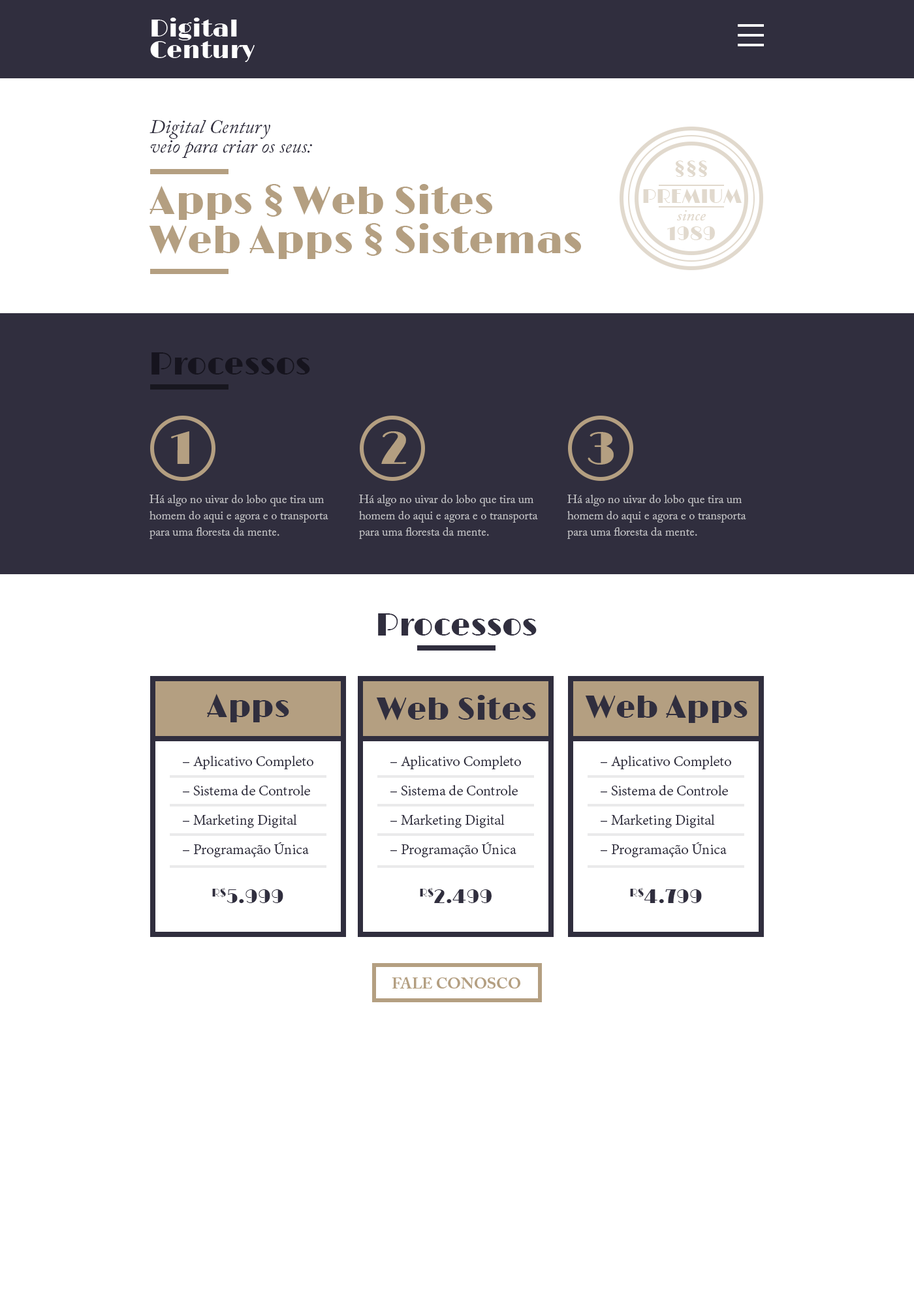
<style>
.page{position:relative;width:914px;height:1305px;background:#ffffff}
.page>*{position:absolute;margin:0}
.t1{font:19.6px/19.6px "ACaslonPro-Italic";color:#302e3e}
.t2{font:39.2px/39.2px "Limelight-Regular";color:#b49f81}
.t3{font:31.3px "Limelight-Regular";color:#16141e}
.t4{font:47px "Limelight-Regular";color:#b49f81}
.t5{font:11.7px/16.3px "ACaslonPro-Regular";color:#bebec1}
.t6{font:31.3px "Limelight-Regular";color:#302e3e}
.t7{font:15.7px/29.4px "AdobeDevanagari-Regular";color:#302e3e}
.t8{font:19.6px "Limelight-Regular";color:#302e3e}
.t9{font:15.7px "ACaslonPro-Bold";color:#b49f81}
</style>
<div class="page">
<p class="t1" style="left:149px;top:120px;width:163px;height:38px">Digital Century<br>veio para criar os seus:</p>
<p class="t2" style="left:149px;top:184px;width:432px;height:75px">Apps § Web Sites<br>Web Apps § Sistemas</p>
<p class="t3" style="left:151px;top:352px;width:159px;height:23px">Processos</p>
<p class="t4" style="left:171px;top:431px;width:18px;height:33px">1</p>
<p class="t4" style="left:381px;top:431px;width:26px;height:33px">2</p>
<p class="t4" style="left:587px;top:432px;width:26px;height:33px">3</p>
<p class="t5" style="left:149px;top:495px;width:179px;height:44px">Há algo no uivar do lobo que tira um homem do aqui e agora e o transporta para uma floresta da mente.</p>
<p class="t5" style="left:359px;top:495px;width:179px;height:44px">Há algo no uivar do lobo que tira um homem do aqui e agora e o transporta para uma floresta da mente.</p>
<p class="t5" style="left:567px;top:495px;width:179px;height:44px">Há algo no uivar do lobo que tira um homem do aqui e agora e o transporta para uma floresta da mente.</p>
<p class="t6" style="left:378px;top:613px;width:158px;height:23px">Processos</p>
<p class="t6" style="left:207px;top:694px;width:82px;height:28px">Apps</p>
<p class="t6" style="left:376px;top:695px;width:160px;height:25px">Web Sites</p>
<p class="t6" style="left:585px;top:694px;width:162px;height:29px">Web Apps</p>
<p class="t7" style="left:183px;top:756px;width:130px;height:101px">– Aplicativo Completo<br>– Sistema de Controle<br>– Marketing Digital<br>– Programação Única</p>
<p class="t7" style="left:390px;top:756px;width:131px;height:101px">– Aplicativo Completo<br>– Sistema de Controle<br>– Marketing Digital<br>– Programação Única</p>
<p class="t7" style="left:600px;top:756px;width:131px;height:101px">– Aplicativo Completo<br>– Sistema de Controle<br>– Marketing Digital<br>– Programação Única</p>
<p class="t8" style="left:212px;top:888px;width:71px;height:15px">R$5.999</p>
<p class="t8" style="left:420px;top:888px;width:71px;height:15px">R$2.499</p>
<p class="t8" style="left:630px;top:888px;width:72px;height:15px">R$4.799</p>
<p class="t9" style="left:392px;top:977px;width:128px;height:12px">FALE CONOSCO</p>
</div>
